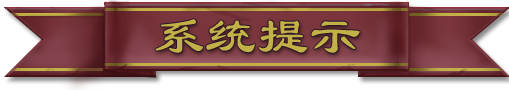
<style>
.page{position:relative;width:509px;height:90px}
.page>*{position:absolute;margin:0}
.t1{font:52px "LiSu";color:#c3b148}
</style>
<div class="page">
<p class="t1" style="left:155px;top:19px;width:205px;height:34px">系统提示</p>
</div>
